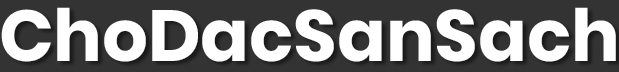
<style>
.page{position:relative;width:619px;height:72px;background:#333333}
.page>*{position:absolute;margin:0}
.t1{font:72px "Poppins-Bold";color:#ffffff}
</style>
<div class="page">
<p class="t1" style="left:1px;top:7px;width:615px;height:55px">ChoDacSanSach</p>
</div>
